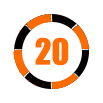
<style>
.page{position:relative;width:103px;height:103px;background:#ffffff}
.page>*{position:absolute;margin:0}
.t1{font:33.3px "Impact";color:#ff6c00}
</style>
<div class="page">
<p class="t1" style="left:35px;top:37px;width:34px;height:29px">20</p>
</div>
